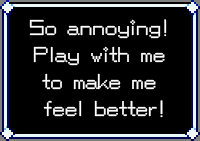
<style>
.page{position:relative;width:200px;height:141px;background:#000000}
.page>*{position:absolute;margin:0}
.t1{font:20.8px/27.1px "PFStardust";color:#ffffff}
</style>
<div class="page">
<p class="t1" style="left:29px;top:19px;width:138px;height:99px;text-align:center">So annoying! <br>Play with me <br>to make me <br>feel better!</p>
</div>
